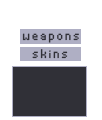
<style>
.page{position:relative;width:102px;height:120px;background:#ffffff}
.page>*{position:absolute;margin:0}
.t1{font:20px "Thintel";letter-spacing:0.1em;color:#303037}
</style>
<div class="page">
<p class="t1" style="left:22px;top:33px;width:57px;height:10px">weapons</p>
<p class="t1" style="left:32px;top:49px;width:36px;height:10px">skins</p>
</div>
